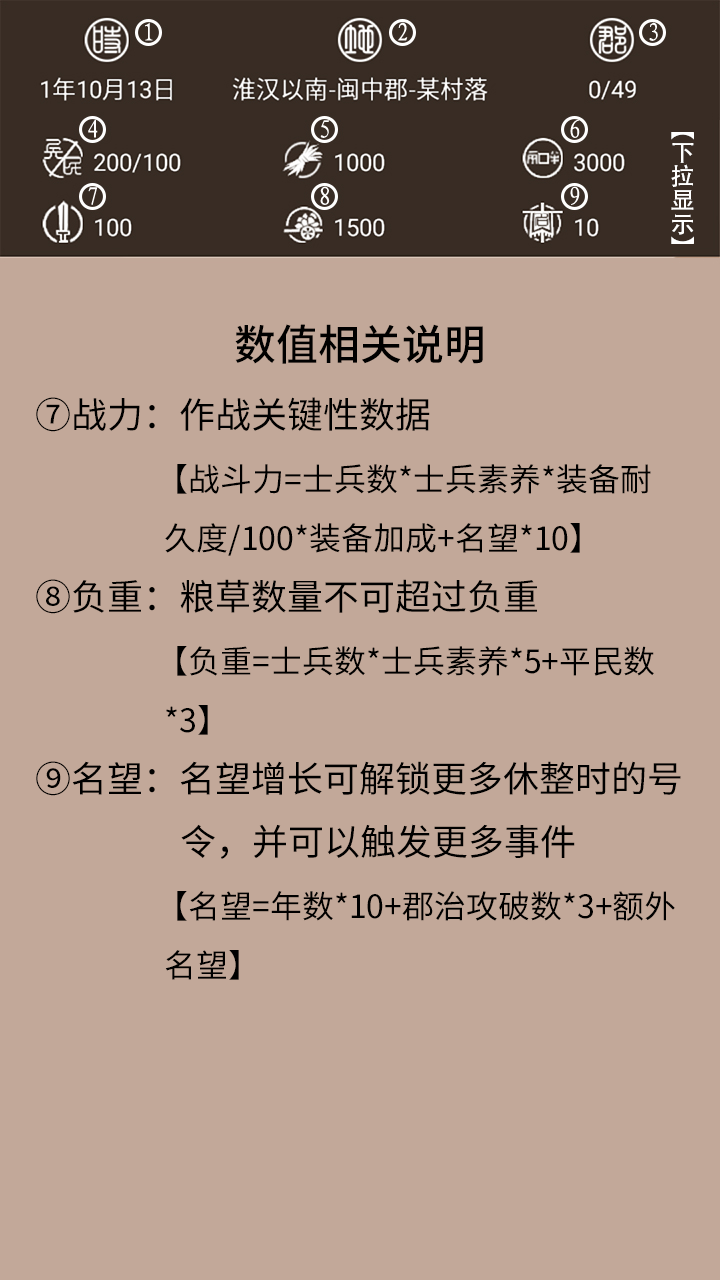
<style>
.page{position:relative;width:720px;height:1280px;background:#c2a899}
.page>*{position:absolute;margin:0}
.t1{font:36px "NotoSansHans-Regular";color:#000000}
.t2{font:42px "NotoSansHans-Medium";color:#000000}
.t3{font:32px "NotoSansHans-Regular";color:#000000}
</style>
<div class="page">
<p class="t1" style="left:36px;top:324px;width:645px;height:656px;text-align:center"><span class="t2">数值相关说明</span><br>⑦战力：作战关键性数据<br>               <span class="t3">【战斗力=士兵数*士兵素养*装备耐<br>                  久度/100*装备加成+名望*10】<br></span>⑧负重：粮草数量不可超过负重<br>               <span class="t3">【负重=士兵数*士兵素养*5+平民数<br>                  *3】<br></span>⑨名望：名望增长可解锁更多休整时的号                      <br>                  令，并可以触发更多事件<br>               <span class="t3">【名望=年数*10+郡治攻破数*3+额外<br>                  名望】</span></p>
</div>
